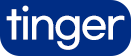
<style>
.page{position:relative;width:131px;height:56px;background:#002d85}
.page>*{position:absolute;margin:0}
.t1{font:40px "GmarketSansMedium";letter-spacing:-0.05em;color:#ffffff}
</style>
<div class="page">
<p class="t1" style="left:6px;top:5px;width:119px;height:45px">tinger</p>
</div>
